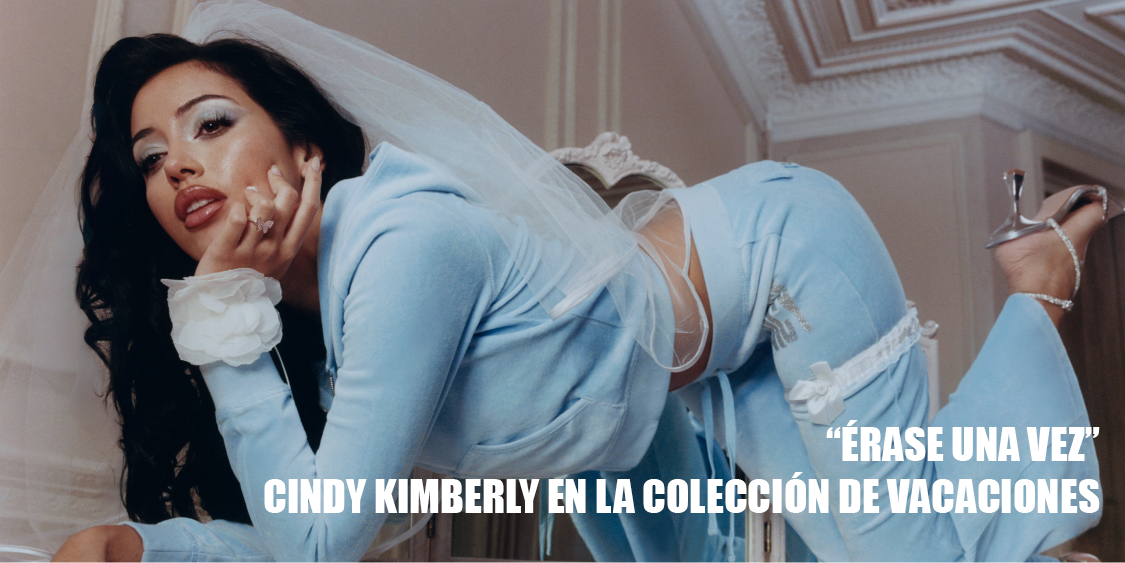
<style>
.page{position:relative;width:1125px;height:563px}
.page>*{position:absolute;margin:0}
.t1{font:43px "Impact";color:#ffffff}
</style>
<div class="page">
<p class="t1" style="left:264px;top:420px;width:836px;height:93px;text-align:right">“ÉRASE UNA VEZ”<br>CINDY KIMBERLY EN LA COLECCIÓN DE VACACIONES</p>
</div>
